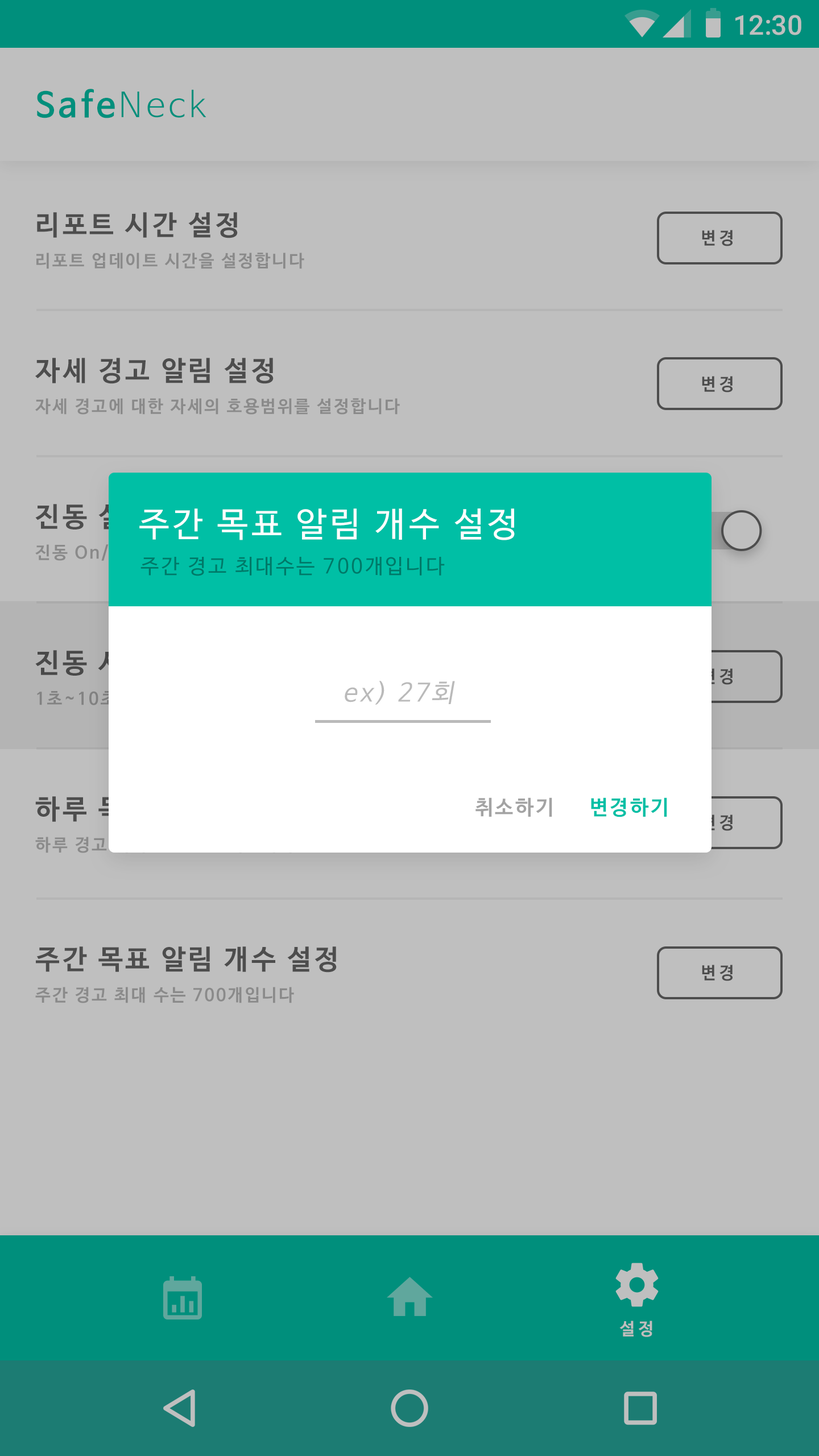
<style>
.page{position:relative;width:819px;height:1456px;background:#bfbfbf}
.page>*{position:absolute;margin:0}
.t1{font:27.3px "Roboto-Medium";color:#bfbfbf}
.t2{font:34.1px "NanumBarunGothicBold";letter-spacing:0.1em;color:#008f7c}
.t3{font:34.1px "NanumBarunGothicLight";letter-spacing:0.1em;color:#008f7c}
.t4{font:27.3px "NanumBarunGothicBold";letter-spacing:0.1em;color:#4d4d4d}
.t5{font:16.9px "NanumBarunGothicBold";letter-spacing:0.2em;color:#4d4d4d}
.t6{font:17.1px "NanumBarunGothicBold";letter-spacing:0.1em;color:#8a8a8a}
.t7{font:27.3px "NanumBarunGothicBold";letter-spacing:0.1em}
.t8{font:34.1px "NanumBarunGothic";letter-spacing:0.1em;color:#fefefe}
.t9{font:17.1px "NanumBarunGothicBold";letter-spacing:0.1em}
.t10{font:20.5px "NanumBarunGothic";letter-spacing:0.1em;color:#007968}
.t11{font:16.9px "NanumBarunGothicBold";letter-spacing:0.2em}
.t12{font:25.2px "NanumBarunGothic";letter-spacing:0.1em;color:#bababa;font-style:italic}
.t13{font:20.5px "NanumBarunGothicBold";letter-spacing:0.1em;color:#a3a3a3}
.t14{font:20.5px "NanumBarunGothicBold";letter-spacing:0.1em;color:#00bfa5}
.t15{font:17px "NanumBarunGothicBold";letter-spacing:0.2em;color:#bfbebe}
</style>
<div class="page">
<p class="t1" style="left:735px;top:15px;width:66px;height:20px">12:30</p>
<p class="t2" style="left:37px;top:89px;width:169px;height:29px">Safe<span class="t3">Neck</span></p>
<p class="t4" style="left:37px;top:212px;width:201px;height:26px">리포트 시간 설정</p>
<p class="t5" style="left:702px;top:230px;width:31px;height:16px">변경</p>
<p class="t6" style="left:36px;top:253px;width:268px;height:16px">리포트 업데이트 시간을 설정합니다</p>
<p class="t4" style="left:35px;top:358px;width:239px;height:26px">자세 경고 알림 설정</p>
<p class="t5" style="left:702px;top:376px;width:31px;height:16px">변경</p>
<p class="t6" style="left:35px;top:398px;width:365px;height:17px">자세 경고에 대한 자세의 호용범위를 설정합니다</p>
<p class="t7" style="left:35px;top:504px;width:112px;height:26px">진동 설정</p>
<p class="t8" style="left:139px;top:508px;width:376px;height:32px">주간 목표 알림 개수 설정</p>
<p class="t9" style="left:35px;top:544px;width:250px;height:17px">진동 On/Off 옵션을 설정합니다</p>
<p class="t10" style="left:140px;top:557px;width:305px;height:19px">주간 경고 최대수는 700개입니다</p>
<p class="t11" style="left:702px;top:668px;width:31px;height:17px">변경</p>
<p class="t12" style="left:345px;top:681px;width:110px;height:24px">ex) 27회</p>
<p class="t13" style="left:475px;top:797px;width:77px;height:20px">취소하기</p>
<p class="t14" style="left:591px;top:797px;width:76px;height:20px">변경하기</p>
<p class="t11" style="left:702px;top:814px;width:31px;height:17px">변경</p>
<p class="t4" style="left:36px;top:946px;width:301px;height:27px">주간 목표 알림 개수 설정</p>
<p class="t5" style="left:702px;top:965px;width:31px;height:16px">변경</p>
<p class="t6" style="left:35px;top:987px;width:259px;height:16px">주간 경고 최대 수는 700개입니다</p>
<p class="t15" style="left:619px;top:1321px;width:33px;height:16px">설정</p>
</div>
